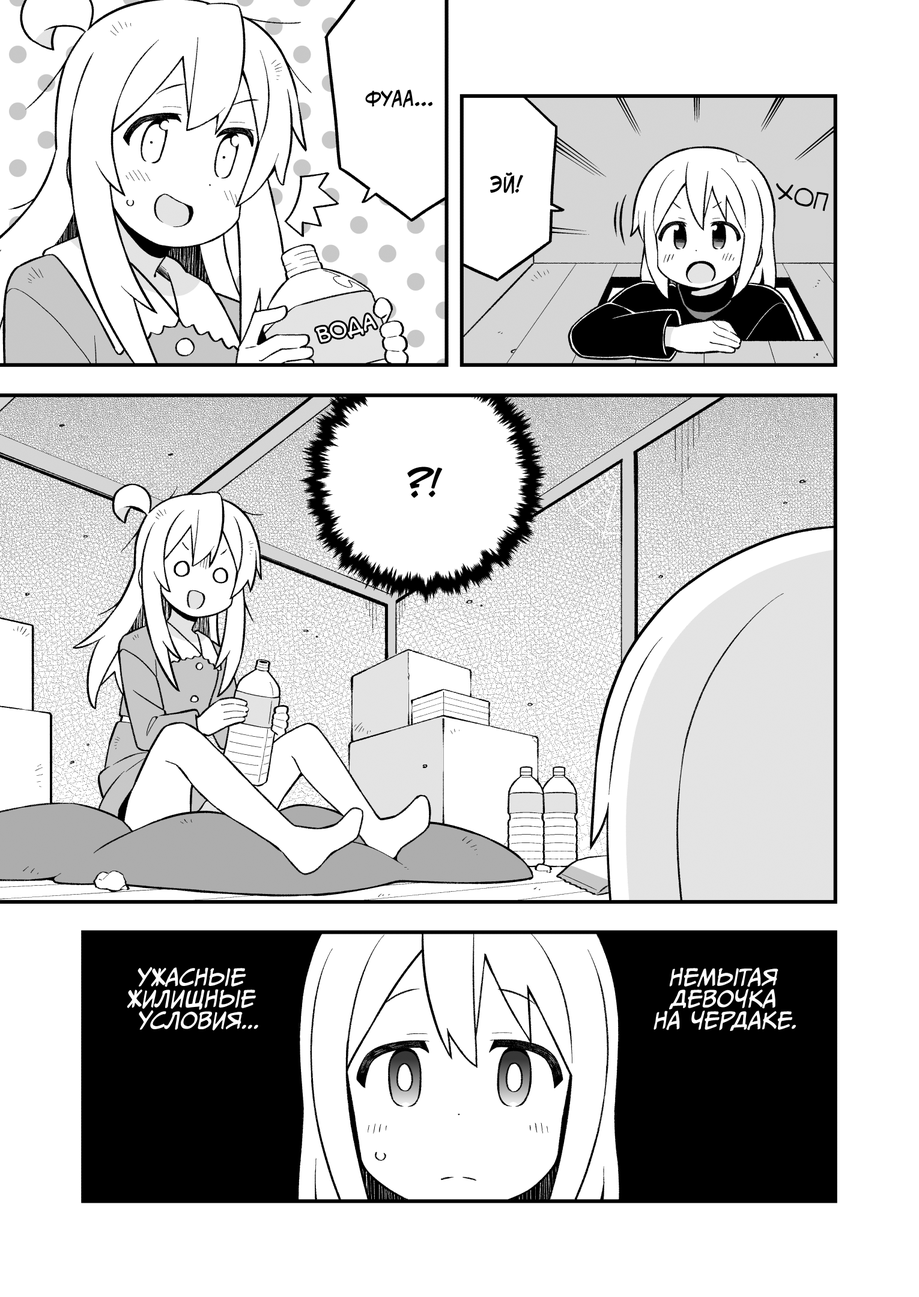
<style>
.page{position:relative;width:919px;height:1297px;background:#ffffff}
.page>*{position:absolute;margin:0}
.t1{font:19.8px "v_CCJeffCampbell";color:#000000;text-transform:uppercase}
.t2{font:21.6px "v_CCJeffCampbell";color:#000000;text-transform:uppercase}
.t3{font:23.4px "v_Augie";color:#000000;text-transform:uppercase}
.t4{font:19.8px "v_CCMonologous";color:#ffffff;text-transform:uppercase}
.t5{font:36px "v_CCJeffCampbell";color:#000000;text-transform:uppercase}
.t6{font:21.6px "CCMeanwhile";color:#ffffff;text-transform:uppercase;font-style:italic}
.t7{font:21.6px "CCMeanwhile";color:#fefefe;text-transform:uppercase;font-style:italic}
</style>
<div class="page">
<p class="t1" style="left:365px;top:90px;width:67px;height:18px">Фуаа...</p>
<p class="t2" style="left:490px;top:172px;width:33px;height:22px">Эй!</p>
<p class="t3" style="left:776px;top:183px;width:53px;height:28px;rotate:13deg">хоп</p>
<p class="t4" style="left:316px;top:314px;width:61px;height:28px;rotate:-15deg">вода</p>
<p class="t5" style="left:407px;top:467px;width:36px;height:31px">?!</p>
<p class="t6" style="left:127px;top:967px;width:131px;height:64px;text-align:center">Ужасные<br>жилищные<br>условия...</p>
<p class="t7" style="left:654px;top:968px;width:142px;height:63px;text-align:center">Немытая<br>девочка<br>на чердаке.</p>
</div>
